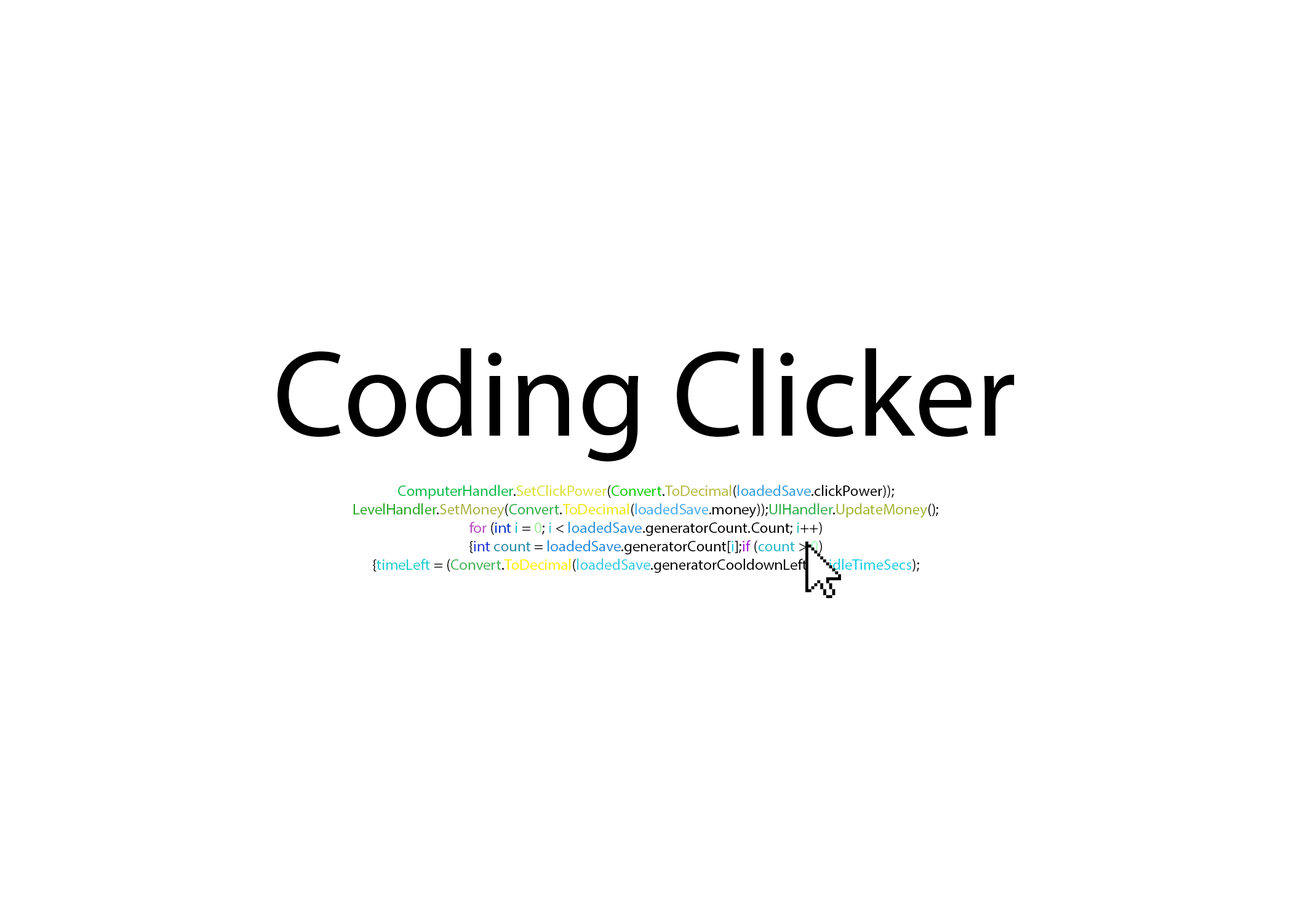
<style>
.page{position:relative;width:1292px;height:923px;background:#ffffff}
.page>*{position:absolute;margin:0}
.t1{font:123.1px "MyriadPro-Regular";color:#000000}
.t2{font:15.4px "MyriadPro-Regular";color:#000000}
.t3{font:15.4px "MyriadPro-Regular";color:#08bf4d}
.t4{font:15.4px "MyriadPro-Regular";color:#dde238}
.t5{font:15.4px "MyriadPro-Regular";color:#12d108}
.t6{font:15.4px "MyriadPro-Regular";color:#b8bc41}
.t7{font:15.4px "MyriadPro-Regular";color:#32a1e1}
.t8{font:15.4px "MyriadPro-Regular";color:#27ab24}
.t9{font:15.4px "MyriadPro-Regular";color:#abb241}
.t10{font:15.4px "MyriadPro-Regular";color:#2cb142}
.t11{font:15.4px "MyriadPro-Regular";color:#eee810}
.t12{font:15.4px "MyriadPro-Regular";color:#47aff1}
.t13{font:15.4px "MyriadPro-Regular";color:#2eb049}
.t14{font:15.4px "MyriadPro-Regular";color:#a5b72f}
.t15{font:15.4px "MyriadPro-Regular";color:#b94dc0}
.t16{font:15.4px "MyriadPro-Regular";color:#0a37c7}
.t17{font:15.4px "MyriadPro-Regular";color:#1bbac8}
.t18{font:15.4px "MyriadPro-Regular";color:#a4f09c}
.t19{font:15.4px "MyriadPro-Regular";color:#45c8d0}
.t20{font:15.4px "MyriadPro-Regular";color:#2594da}
.t21{font:15.4px "MyriadPro-Regular";color:#31bfba}
.t22{font:15.4px "MyriadPro-Regular";color:#2536d7}
.t23{font:15.4px "MyriadPro-Regular";color:#258ea8}
.t24{font:15.4px "MyriadPro-Regular";color:#258ae0}
.t25{font:15.4px "MyriadPro-Regular";color:#17cfda}
.t26{font:15.4px "MyriadPro-Regular";color:#a819e4}
.t27{font:15.4px "MyriadPro-Regular";color:#22bacc}
.t28{font:15.4px "MyriadPro-Regular";color:#abffb9}
.t29{font:15.4px "MyriadPro-Regular";color:#1ccdcf}
.t30{font:15.4px "MyriadPro-Regular";color:#46b658}
.t31{font:15.4px "MyriadPro-Regular";color:#fff000}
.t32{font:15.4px "MyriadPro-Regular";color:#35cbe6}
.t33{font:15.4px "MyriadPro-Regular";color:#14cee4}
</style>
<div class="page">
<p class="t1" style="left:277px;top:348px;width:738px;height:113px">Coding Clicker</p>
<p class="t2" style="left:353px;top:485px;width:585px;height:88px;text-align:center"><span class="t3">ComputerHandler</span>.<span class="t4">SetClickPower</span>(<span class="t5">Convert</span>.<span class="t6">ToDecimal</span>(<span class="t7">loadedSave</span>.clickPower));<br><span class="t8">LevelHandler</span>.<span class="t9">SetMoney</span>(<span class="t10">Convert</span>.<span class="t11">ToDecimal</span>(<span class="t12">loadedSave</span>.money));<span class="t13">UIHandler</span>.<span class="t14">UpdateMoney</span>();<br><span class="t15">for</span> (<span class="t16">int </span><span class="t17">i </span>= <span class="t18">0</span>; <span class="t19">i </span>&lt; <span class="t20">loadedSave</span>.generatorCount.Count; <span class="t21">i</span>++)<br>{<span class="t22">int </span><span class="t23">count </span>= <span class="t24">loadedSave</span>.generatorCount[<span class="t25">i</span>];<span class="t26">if </span>(<span class="t27">count </span>&gt; <span class="t28">0</span>)<br>{<span class="t29">timeLeft </span>= (<span class="t30">Convert</span>.<span class="t31">ToDecimal</span>(<span class="t32">loadedSave</span>.generatorCooldownLeft[i])-<span class="t33">idleTimeSecs</span>);</p>
</div>
